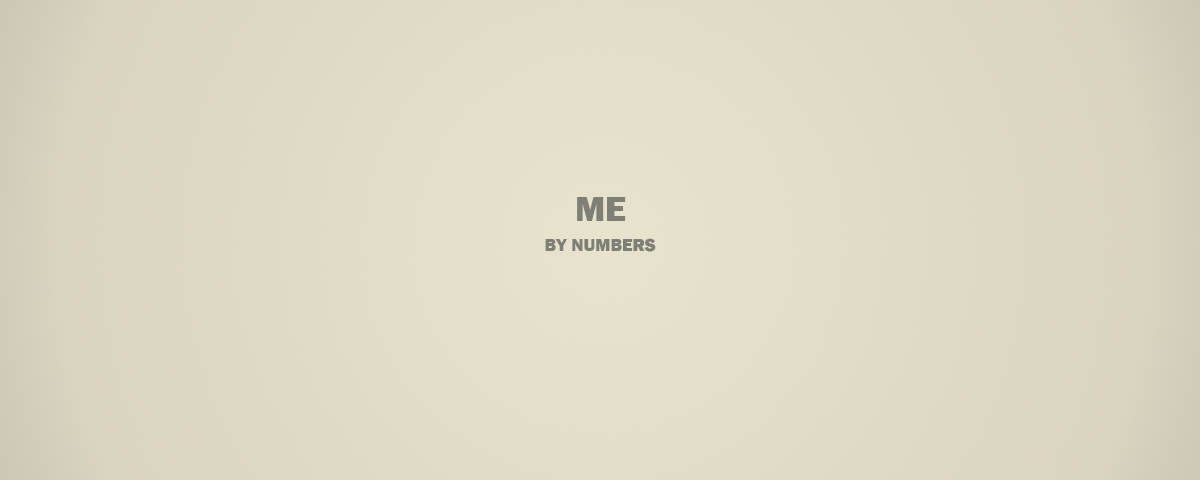
<style>
.page{position:relative;width:1200px;height:480px}
.page>*{position:absolute;margin:0}
.t1{font:36px "FranklinGothic-Heavy";color:#7f7f75}
.t2{font:18px "FranklinGothic-Heavy";color:#7f7f75}
</style>
<div class="page">
<p class="t1" style="left:577px;top:197px;width:49px;height:24px">ME</p>
<p class="t2" style="left:545px;top:238px;width:111px;height:14px">BY NUMBERS</p>
</div>
